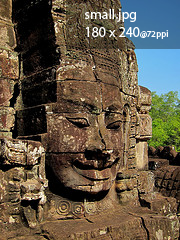
<style>
.page{position:relative;width:180px;height:240px}
.page>*{position:absolute;margin:0}
.t1{font:14px/18px "MyriadPro-Regular";color:#ffffff}
.t2{font:9px/18px "MyriadPro-Regular";color:#ffffff}
</style>
<div class="page">
<p class="t1" style="left:84px;top:9px;width:84px;height:30px">small.jpg<br>180 x 240<span class="t2">@72ppi</span></p>
</div>
